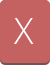
<style>
.page{position:relative;width:50px;height:65px;background:#c46262}
.page>*{position:absolute;margin:0}
.t1{font:36px "OpenSans-Light";letter-spacing:-0.048em;color:#fefefe;font-variant:small-caps}
</style>
<div class="page">
<p class="t1" style="left:14px;top:18px;width:20px;height:26px">X</p>
</div>
